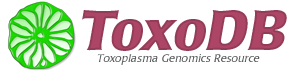
<style>
.page{position:relative;width:297px;height:70px;background:#ffffff}
.page>*{position:absolute;margin:0}
.t1{font:55px "PopplLaudatio-Bold";font-style:italic}
</style>
<div class="page">
<p class="t1" style="left:82px;top:10px;width:205px;height:41px">ToxoDB</p>
</div>
